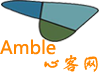
<style>
.page{position:relative;width:102px;height:75px;background:#ffffff}
.page>*{position:absolute;margin:0}
.t1{font:18px "MicrosoftYaHei";color:#ff8600}
.t2{font:20px "FZSTK--GBK1-0";color:#ff8600}
</style>
<div class="page">
<p class="t1" style="left:0px;top:39px;width:56px;height:16px">Amble</p>
<p class="t2" style="left:44px;top:55px;width:54px;height:17px">心客网</p>
</div>
